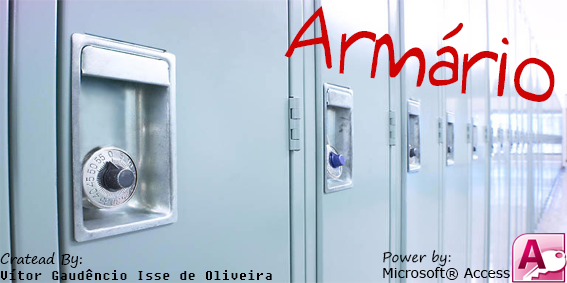
<style>
.page{position:relative;width:567px;height:283px}
.page>*{position:absolute;margin:0}
.t1{font:79.6px "Augie";color:#cf0202;scale:0.82 1}
.t2{font:13.7px "Fixedsys";color:#000000}
.t3{font:13.7px "SegoePrint";color:#000000}
.t4{font:13.7px "MSReferenceSansSerif";color:#000000}
</style>
<div class="page">
<p class="t1" style="left:284px;top:5px;width:271px;height:97px;rotate:9deg">Armário</p>
<p class="t2" style="left:0px;top:252px;width:272px;height:28px"><span class="t3">Cratead By:<br></span>Vítor Gaudêncio Isse de Oliveira</p>
<p class="t4" style="left:383px;top:250px;width:127px;height:30px"><span class="t3">Power by:<br></span>Microsoft® Access</p>
</div>
